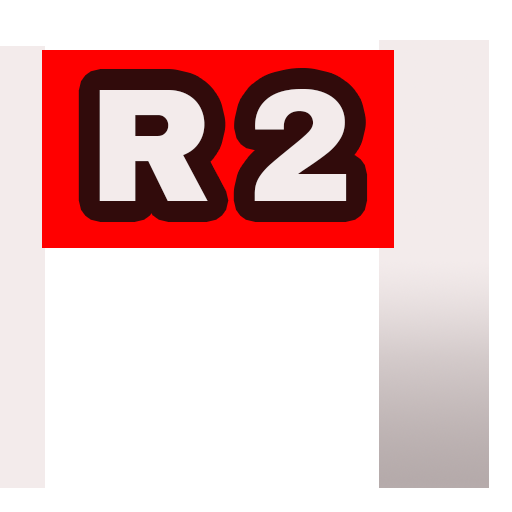
<style>
.page{position:relative;width:512px;height:512px;background:#ffffff}
.page>*{position:absolute;margin:0}
.t1{font:160px "ArchivoBlack-Regular";letter-spacing:-0.06em;color:#f3ebeb}
</style>
<div class="page">
<p class="t1" style="left:99px;top:89px;width:248px;height:112px">R 2</p>
</div>
